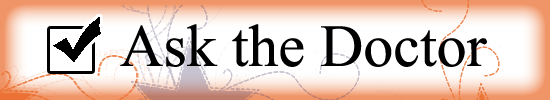
<style>
.page{position:relative;width:550px;height:100px;background:#ffffff}
.page>*{position:absolute;margin:0}
.t1{font:60px "TimesNewRomanPSMT";color:#000000}
</style>
<div class="page">
<p class="t1" style="left:120px;top:24px;width:367px;height:43px">Ask the Doctor</p>
</div>
